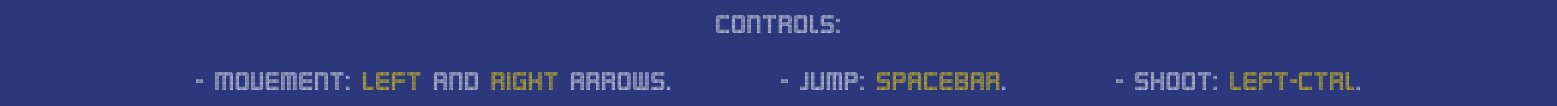
<style>
.page{position:relative;width:1557px;height:106px;background:#2d387c}
.page>*{position:absolute;margin:0}
.t1{font:24px "KarnivoreDigit"}
</style>
<div class="page">
<p class="t1" style="left:195px;top:15px;width:1165px;height:75px;text-align:center">controls:<br><br>- Movement: Left and right arrows.          - jump: spacebar.          - shoot: Left-ctrl.</p>
</div>
